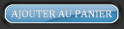
<style>
.page{position:relative;width:124px;height:29px}
.page>*{position:absolute;margin:0}
.t1{font:10.4px "Cambria";letter-spacing:-0.025em;color:#dcdcdc;font-weight:bold;scale:1.05 1}
</style>
<div class="page">
<p class="t1" style="left:11px;top:10px;width:101px;height:10px">AJOUTER AU PANIER</p>
</div>
